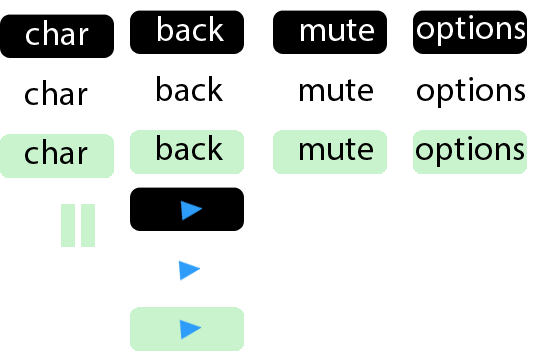
<style>
.page{position:relative;width:537px;height:356px;background:#ffffff}
.page>*{position:absolute;margin:0}
.t1{font:34.7px "MyriadPro-Regular";color:#ffffff}
.t2{font:34.7px "MyriadPro-Regular";color:#000000}
</style>
<div class="page">
<p class="t1" style="left:158px;top:16px;width:66px;height:25px">back</p>
<p class="t1" style="left:417px;top:15px;width:108px;height:31px">options</p>
<p class="t1" style="left:26px;top:20px;width:63px;height:25px">char</p>
<p class="t1" style="left:301px;top:19px;width:73px;height:22px">mute</p>
<p class="t2" style="left:157px;top:76px;width:66px;height:25px">back</p>
<p class="t2" style="left:417px;top:77px;width:108px;height:31px">options</p>
<p class="t2" style="left:25px;top:80px;width:63px;height:25px">char</p>
<p class="t2" style="left:300px;top:79px;width:73px;height:22px">mute</p>
<p class="t2" style="left:157px;top:135px;width:66px;height:25px">back</p>
<p class="t2" style="left:416px;top:136px;width:108px;height:31px">options</p>
<p class="t2" style="left:25px;top:139px;width:63px;height:25px">char</p>
<p class="t2" style="left:300px;top:138px;width:73px;height:22px">mute</p>
</div>
